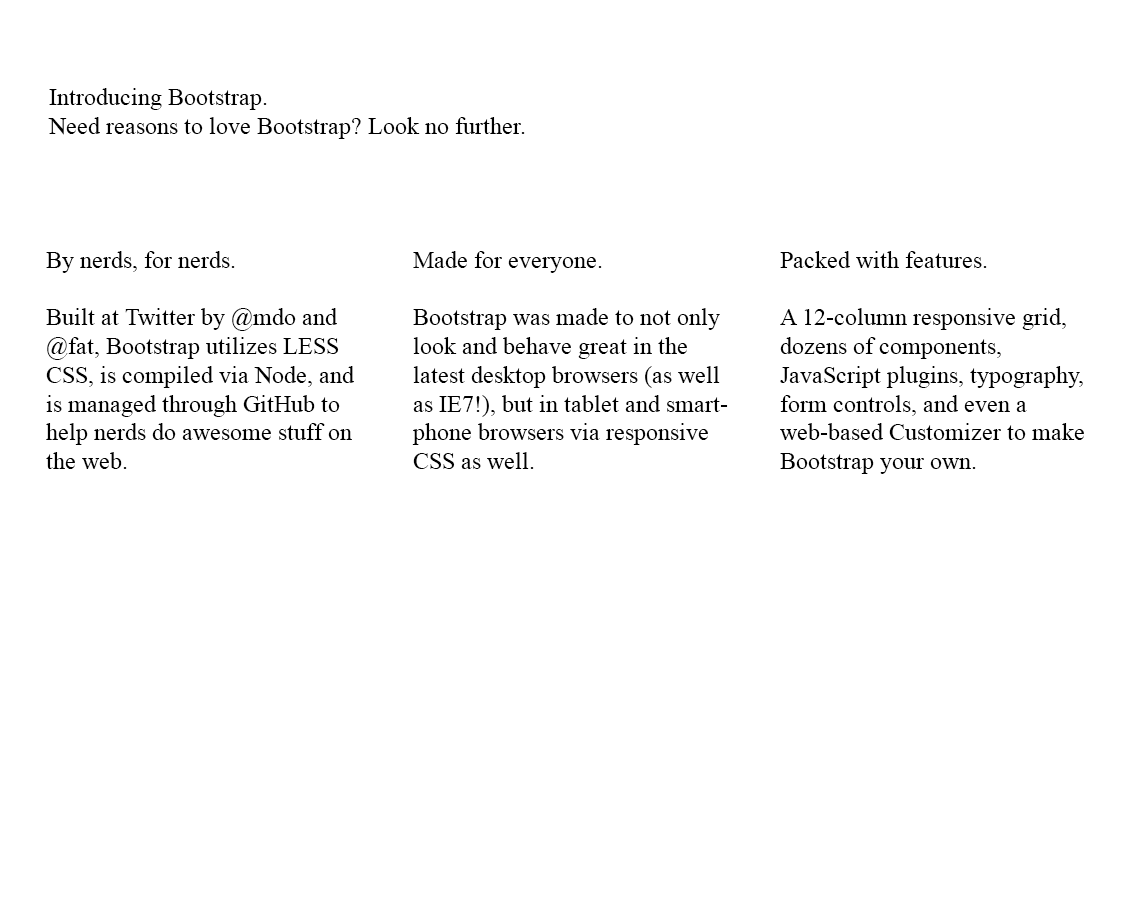
<style>
.page{position:relative;width:1140px;height:900px;background:#ffffff}
.page>*{position:absolute;margin:0}
.t1{font:24px "TimesNewRomanPSMT";color:#000000}
</style>
<div class="page">
<p class="t1" style="left:48px;top:88px;width:477px;height:51px">Introducing Bootstrap.<br>Need reasons to love Bootstrap? Look no further.</p>
<p class="t1" style="left:46px;top:251px;width:308px;height:218px">By nerds, for nerds.<br><br>Built at Twitter by @mdo and @fat, Bootstrap utilizes LESS CSS, is compiled via Node, and is managed through GitHub to help nerds do awesome stuff on the web.</p>
<p class="t1" style="left:412px;top:251px;width:316px;height:218px">Made for everyone.<br><br>Bootstrap was made to not only look and behave great in the latest desktop browsers (as well as IE7!), but in tablet and smartphone browsers via responsive CSS as well.</p>
<p class="t1" style="left:780px;top:251px;width:304px;height:223px">Packed with features.<br><br>A 12-column responsive grid, dozens of components, JavaScript plugins, typography, form controls, and even a web-based Customizer to make Bootstrap your own.</p>
</div>
